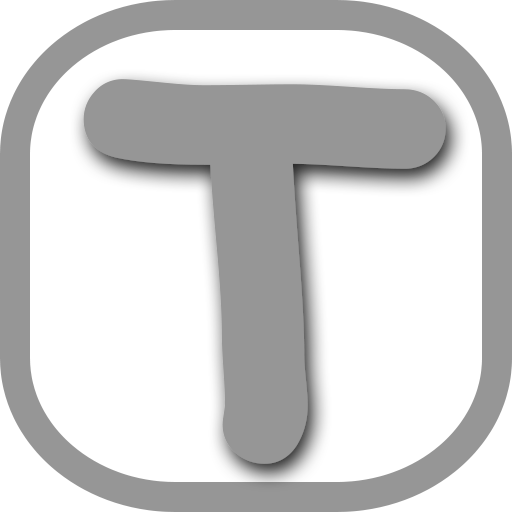
<style>
.page{position:relative;width:512px;height:512px;background:#ffffff}
.page>*{position:absolute;margin:0}
.t1{font:500px "ComicSansMS-Bold";color:#969696;font-weight:bold}
</style>
<div class="page">
<p class="t1" style="left:83px;top:79px;width:363px;height:385px">T</p>
</div>
